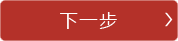
<style>
.page{position:relative;width:178px;height:41px;background:#b43129}
.page>*{position:absolute;margin:0}
.t1{font:18px "MicrosoftYaHei";letter-spacing:0.1em;color:#ffffff}
</style>
<div class="page">
<p class="t1" style="left:60px;top:12px;width:57px;height:17px">下一步</p>
</div>
